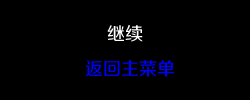
<style>
.page{position:relative;width:250px;height:100px;background:#000000}
.page>*{position:absolute;margin:0}
.t1{font:18px "FZZZHUNHJW--GB1-0";color:#fefefe}
.t2{font:18px "FZZZHUNHJW--GB1-0";color:#0000ff}
</style>
<div class="page">
<p class="t1" style="left:107px;top:25px;width:36px;height:17px">继续</p>
<p class="t2" style="left:85px;top:60px;width:90px;height:17px">返回主菜单</p>
</div>
